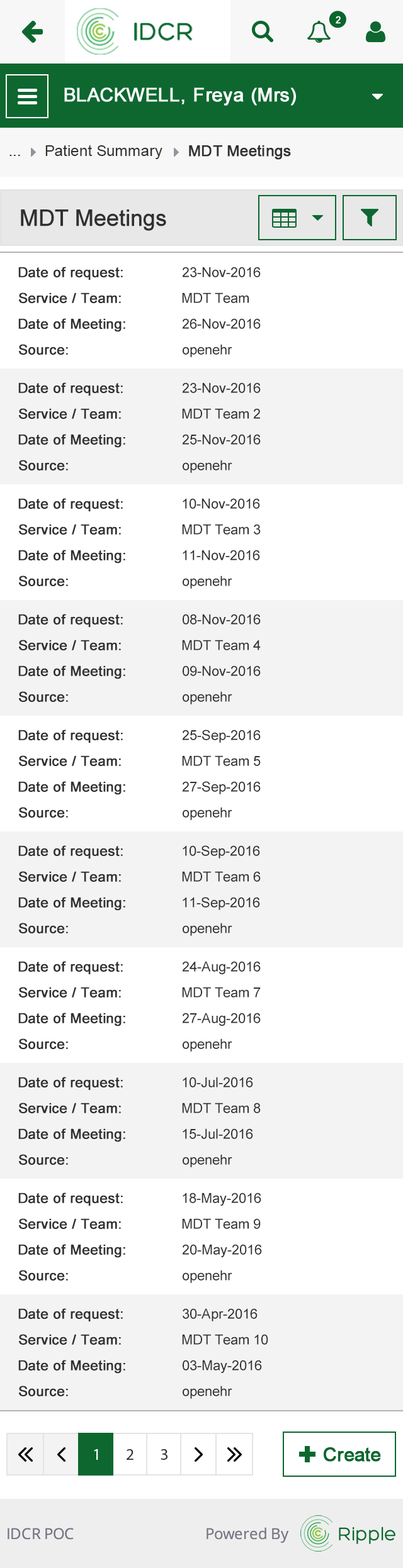
<style>
.page{position:relative;width:403px;height:1568px;background:#ffffff}
.page>*{position:absolute;margin:0}
.t1{font:15.1px "ArialMT";color:#313131}
.t2{font:15.1px "ArialMT";color:#313131;font-weight:bold}
.t3{font:22.6px "ArialMT";color:#303030;font-weight:bold}
.t4{font:13.8px "ArialMT";color:#303030;font-weight:bold}
.t5{font:13.8px "ArialMT";color:#303030}
</style>
<div class="page">
<p class="t1" style="left:45px;top:145px;width:117px;height:14px">Patient Summary</p>
<p class="t2" style="left:189px;top:145px;width:102px;height:15px">MDT Meetings</p>
<p class="t1" style="left:9px;top:155px;width:11px;height:1px">...</p>
<p class="t3" style="left:21px;top:209px;width:145px;height:22px">MDT Meetings</p>
<p class="t4" style="left:18px;top:267px;width:105px;height:13px">Date of request:</p>
<p class="t5" style="left:182px;top:267px;width:78px;height:10px">23-Nov-2016</p>
<p class="t4" style="left:19px;top:292px;width:102px;height:11px">Service / Team:</p>
<p class="t5" style="left:182px;top:292px;width:66px;height:11px">MDT Team</p>
<p class="t4" style="left:18px;top:318px;width:107px;height:14px">Date of Meeting:</p>
<p class="t5" style="left:182px;top:318px;width:78px;height:11px">26-Nov-2016</p>
<p class="t4" style="left:19px;top:344px;width:49px;height:11px">Source:</p>
<p class="t5" style="left:182px;top:344px;width:50px;height:13px">openehr</p>
<p class="t4" style="left:18px;top:382px;width:105px;height:14px">Date of request:</p>
<p class="t5" style="left:182px;top:382px;width:78px;height:11px">23-Nov-2016</p>
<p class="t4" style="left:19px;top:408px;width:102px;height:11px">Service / Team:</p>
<p class="t5" style="left:182px;top:408px;width:78px;height:11px">MDT Team 2</p>
<p class="t4" style="left:18px;top:434px;width:107px;height:14px">Date of Meeting:</p>
<p class="t5" style="left:182px;top:434px;width:78px;height:11px">25-Nov-2016</p>
<p class="t4" style="left:19px;top:460px;width:49px;height:10px">Source:</p>
<p class="t5" style="left:182px;top:460px;width:50px;height:13px">openehr</p>
<p class="t4" style="left:18px;top:498px;width:105px;height:13px">Date of request:</p>
<p class="t5" style="left:182px;top:498px;width:78px;height:11px">10-Nov-2016</p>
<p class="t4" style="left:19px;top:524px;width:102px;height:11px">Service / Team:</p>
<p class="t5" style="left:182px;top:524px;width:78px;height:11px">MDT Team 3</p>
<p class="t4" style="left:18px;top:550px;width:107px;height:14px">Date of Meeting:</p>
<p class="t5" style="left:182px;top:550px;width:78px;height:10px">11-Nov-2016</p>
<p class="t4" style="left:19px;top:575px;width:49px;height:11px">Source:</p>
<p class="t5" style="left:182px;top:575px;width:50px;height:14px">openehr</p>
<p class="t4" style="left:18px;top:614px;width:105px;height:13px">Date of request:</p>
<p class="t5" style="left:182px;top:614px;width:78px;height:11px">08-Nov-2016</p>
<p class="t4" style="left:19px;top:640px;width:102px;height:10px">Service / Team:</p>
<p class="t5" style="left:182px;top:640px;width:78px;height:10px">MDT Team 4</p>
<p class="t4" style="left:18px;top:665px;width:107px;height:14px">Date of Meeting:</p>
<p class="t5" style="left:182px;top:665px;width:78px;height:11px">09-Nov-2016</p>
<p class="t4" style="left:19px;top:691px;width:49px;height:11px">Source:</p>
<p class="t5" style="left:182px;top:691px;width:50px;height:13px">openehr</p>
<p class="t4" style="left:18px;top:730px;width:105px;height:13px">Date of request:</p>
<p class="t5" style="left:182px;top:730px;width:78px;height:13px">25-Sep-2016</p>
<p class="t4" style="left:19px;top:755px;width:102px;height:11px">Service / Team:</p>
<p class="t5" style="left:182px;top:755px;width:78px;height:11px">MDT Team 5</p>
<p class="t4" style="left:18px;top:781px;width:107px;height:14px">Date of Meeting:</p>
<p class="t5" style="left:182px;top:781px;width:78px;height:13px">27-Sep-2016</p>
<p class="t4" style="left:19px;top:807px;width:49px;height:11px">Source:</p>
<p class="t5" style="left:182px;top:807px;width:50px;height:13px">openehr</p>
<p class="t4" style="left:18px;top:845px;width:105px;height:14px">Date of request:</p>
<p class="t5" style="left:182px;top:845px;width:78px;height:14px">10-Sep-2016</p>
<p class="t4" style="left:19px;top:871px;width:102px;height:11px">Service / Team:</p>
<p class="t5" style="left:182px;top:871px;width:78px;height:11px">MDT Team 6</p>
<p class="t4" style="left:18px;top:897px;width:107px;height:14px">Date of Meeting:</p>
<p class="t5" style="left:182px;top:897px;width:78px;height:13px">11-Sep-2016</p>
<p class="t4" style="left:19px;top:923px;width:49px;height:10px">Source:</p>
<p class="t5" style="left:182px;top:923px;width:50px;height:13px">openehr</p>
<p class="t4" style="left:18px;top:961px;width:105px;height:13px">Date of request:</p>
<p class="t5" style="left:182px;top:961px;width:78px;height:13px">24-Aug-2016</p>
<p class="t4" style="left:19px;top:987px;width:102px;height:11px">Service / Team:</p>
<p class="t5" style="left:182px;top:987px;width:78px;height:11px">MDT Team 7</p>
<p class="t4" style="left:18px;top:1013px;width:107px;height:13px">Date of Meeting:</p>
<p class="t5" style="left:182px;top:1013px;width:78px;height:13px">27-Aug-2016</p>
<p class="t4" style="left:19px;top:1038px;width:49px;height:11px">Source:</p>
<p class="t5" style="left:182px;top:1038px;width:50px;height:14px">openehr</p>
<p class="t4" style="left:18px;top:1077px;width:105px;height:13px">Date of request:</p>
<p class="t5" style="left:182px;top:1077px;width:71px;height:10px">10-Jul-2016</p>
<p class="t4" style="left:19px;top:1103px;width:102px;height:10px">Service / Team:</p>
<p class="t5" style="left:182px;top:1103px;width:78px;height:10px">MDT Team 8</p>
<p class="t4" style="left:18px;top:1128px;width:107px;height:14px">Date of Meeting:</p>
<p class="t5" style="left:182px;top:1128px;width:71px;height:11px">15-Jul-2016</p>
<p class="t4" style="left:19px;top:1154px;width:49px;height:11px">Source:</p>
<p class="t5" style="left:182px;top:1154px;width:50px;height:13px">openehr</p>
<p class="t4" style="left:18px;top:1193px;width:105px;height:13px">Date of request:</p>
<p class="t5" style="left:182px;top:1193px;width:79px;height:13px">18-May-2016</p>
<p class="t4" style="left:19px;top:1218px;width:102px;height:11px">Service / Team:</p>
<p class="t5" style="left:182px;top:1218px;width:78px;height:11px">MDT Team 9</p>
<p class="t4" style="left:18px;top:1244px;width:107px;height:14px">Date of Meeting:</p>
<p class="t5" style="left:182px;top:1244px;width:80px;height:13px">20-May-2016</p>
<p class="t4" style="left:19px;top:1270px;width:49px;height:11px">Source:</p>
<p class="t5" style="left:182px;top:1270px;width:50px;height:13px">openehr</p>
<p class="t4" style="left:18px;top:1308px;width:105px;height:13px">Date of request:</p>
<p class="t5" style="left:182px;top:1308px;width:75px;height:13px">30-Apr-2016</p>
<p class="t4" style="left:19px;top:1334px;width:102px;height:11px">Service / Team:</p>
<p class="t5" style="left:182px;top:1334px;width:86px;height:11px">MDT Team 10</p>
<p class="t4" style="left:18px;top:1360px;width:107px;height:14px">Date of Meeting:</p>
<p class="t5" style="left:182px;top:1360px;width:80px;height:13px">03-May-2016</p>
<p class="t4" style="left:19px;top:1386px;width:49px;height:10px">Source:</p>
<p class="t5" style="left:182px;top:1386px;width:50px;height:13px">openehr</p>
</div>
